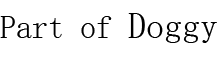
<style>
.page{position:relative;width:220px;height:60px;background:#ffffff}
.page>*{position:absolute;margin:0}
.t1{font:32px "SimSun";color:#000000}
.t2{font:36px "SimSun";color:#000000}
</style>
<div class="page">
<p class="t1" style="left:0px;top:13px;width:217px;height:30px">Part of <span class="t2">Doggy</span></p>
</div>
